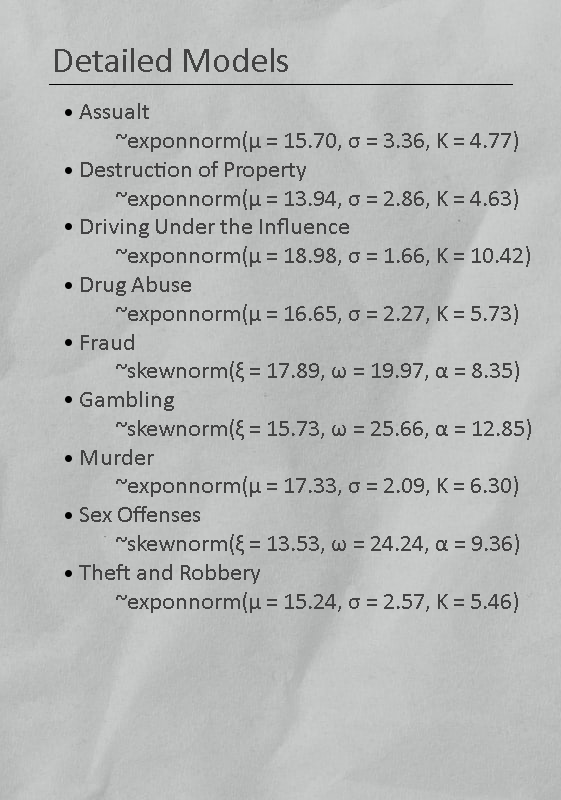
<style>
.page{position:relative;width:561px;height:800px}
.page>*{position:absolute;margin:0}
.t1{font:36px "Calibri";color:#434343}
.t2{font:24px "Calibri";color:#434343}
</style>
<div class="page">
<p class="t1" style="left:55px;top:48px;width:233px;height:24px">Detailed Models</p>
<p class="t2" style="left:79px;top:103px;width:452px;height:510px">Assualt <br> ~exponnorm(μ = 15.70, σ = 3.36, K = 4.77)<br>Destruction of Property<br> ~exponnorm(μ = 13.94, σ = 2.86, K = 4.63)<br>Driving Under the Influence<br> ~exponnorm(μ = 18.98, σ = 1.66, K = 10.42)<br>Drug Abuse<br> ~exponnorm(μ = 16.65, σ = 2.27, K = 5.73)<br>Fraud<br> ~skewnorm(ξ = 17.89, ω = 19.97, α = 8.35)<br>Gambling<br> ~skewnorm(ξ = 15.73, ω = 25.66, α = 12.85)<br>Murder<br> ~exponnorm(μ = 17.33, σ = 2.09, K = 6.30)<br>Sex Offenses<br> ~skewnorm(ξ = 13.53, ω = 24.24, α = 9.36)<br>Theft and Robbery<br> ~exponnorm(μ = 15.24, σ = 2.57, K = 5.46)</p>
</div>
